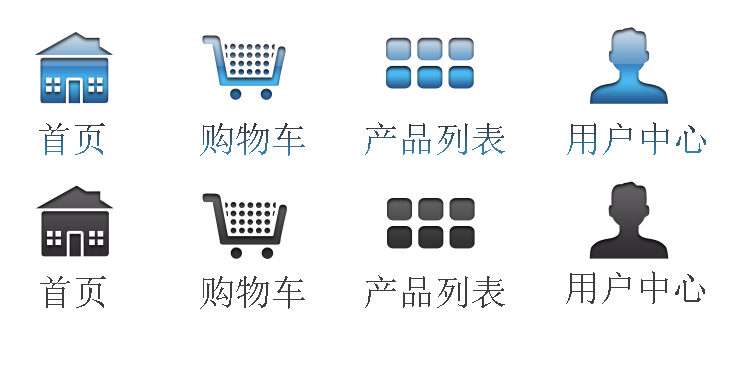
<style>
.page{position:relative;width:737px;height:366px;background:#ffffff}
.page>*{position:absolute;margin:0}
.t1{font:36px "SimSun"}
.t2{font:36px "SimSun";color:#403d40}
</style>
<div class="page">
<p class="t1" style="left:39px;top:123px;width:66px;height:32px">首页</p>
<p class="t1" style="left:200px;top:123px;width:105px;height:33px">购物车</p>
<p class="t1" style="left:365px;top:122px;width:140px;height:33px">产品列表</p>
<p class="t1" style="left:567px;top:122px;width:139px;height:33px">用户中心</p>
<p class="t2" style="left:40px;top:276px;width:66px;height:32px">首页</p>
<p class="t2" style="left:200px;top:276px;width:105px;height:33px">购物车</p>
<p class="t2" style="left:365px;top:275px;width:140px;height:33px">产品列表</p>
<p class="t2" style="left:566px;top:271px;width:139px;height:33px">用户中心</p>
</div>
